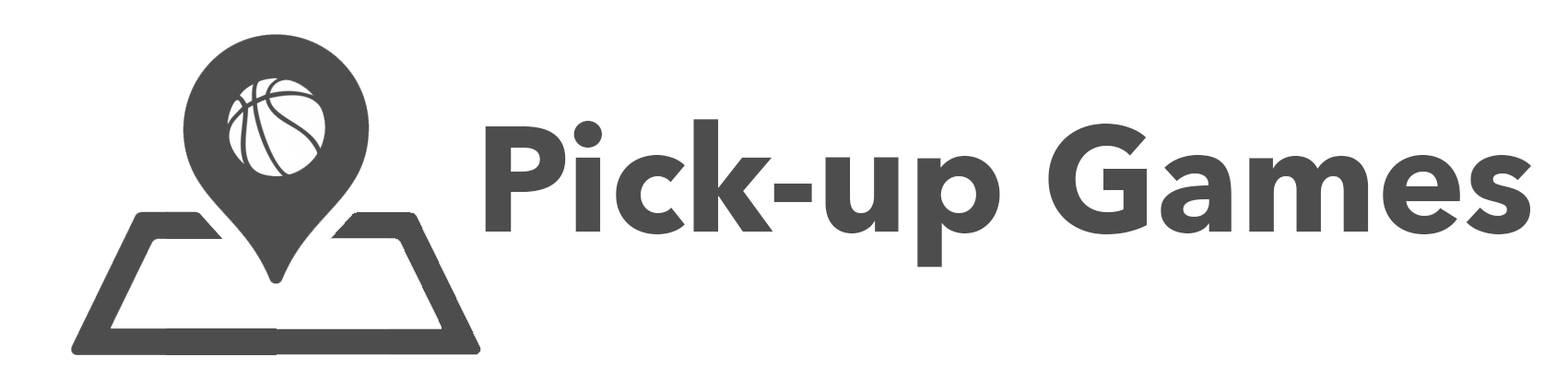
<style>
.page{position:relative;width:1568px;height:369px;background:#ffffff}
.page>*{position:absolute;margin:0}
.t1{font:148.1px "AvenirNext-Bold";color:#4d4d4d}
</style>
<div class="page">
<p class="t1" style="left:485px;top:119px;width:1046px;height:148px">Pick-up Games</p>
</div>
